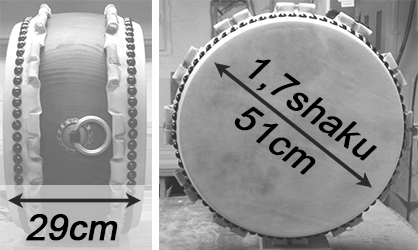
<style>
.page{position:relative;width:418px;height:250px}
.page>*{position:absolute;margin:0}
.t1{font:36px/47px "ArialMT";color:#000000;font-weight:bold;font-style:italic}
.t2{font:36px "ArialMT";color:#000000;font-weight:bold;font-style:italic}
</style>
<div class="page">
<p class="t1" style="left:234px;top:59px;width:143px;height:116px;rotate:36deg">1,7shaku<br>  51cm</p>
<p class="t2" style="left:26px;top:214px;width:92px;height:27px">29cm</p>
</div>
